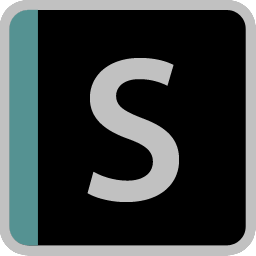
<style>
.page{position:relative;width:256px;height:256px;background:#000000}
.page>*{position:absolute;margin:0}
.t1{font:208.3px "MyriadPro-Semibold";color:#d1d1d1}
</style>
<div class="page">
<p class="t1" style="left:87px;top:58px;width:92px;height:144px;opacity:0.92">S</p>
</div>
